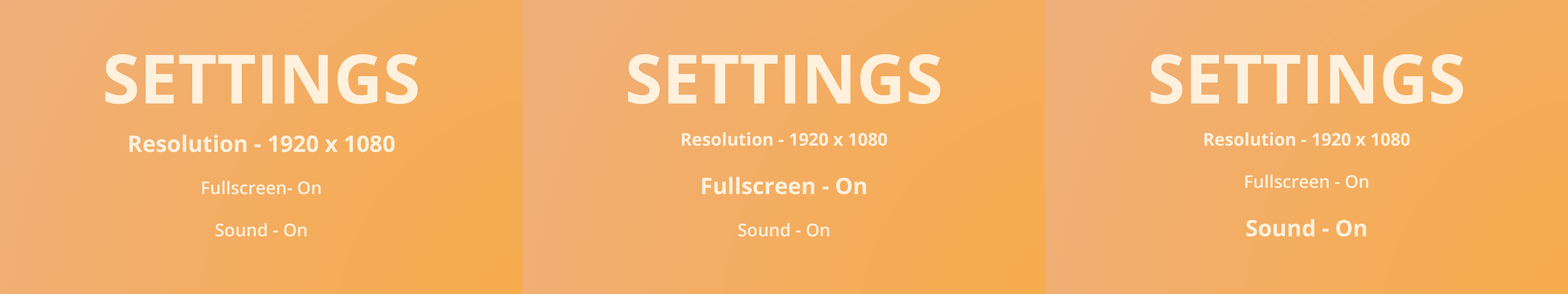
<style>
.page{position:relative;width:1568px;height:294px}
.page>*{position:absolute;margin:0}
.t1{font:17.6px "OpenSans-Semibold";color:#fff1dd}
.t2{font:17.6px "OpenSans-Bold";color:#8f8b8b}
.t3{font:68.1px "OpenSans-Bold";color:#fff1dd}
.t4{font:22.7px "OpenSans-Bold";color:#fff1dd}
.t5{font:17.6px "OpenSans-Bold";color:#fff1dd}
</style>
<div class="page">
<p class="t1" style="left:105px;top:54px;width:313px;height:183px;text-align:center"><span class="t2"><br><br><br></span><span class="t3">SETTINGS<br><br></span><span class="t4">Resolution - 1920 x 1080<br></span><br>Fullscreen- On<br><br>Sound - On</p>
<p class="t5" style="left:628px;top:54px;width:313px;height:183px;text-align:center"><span class="t2"><br><br><br></span><span class="t3">SETTINGS<br></span><br>Resolution - 1920 x 1080<br><br><span class="t4">Fullscreen - On<br></span><span class="t1"><br>Sound - On</span></p>
<p class="t5" style="left:1151px;top:54px;width:312px;height:183px;text-align:center"><span class="t2"><br><br><br></span><span class="t3">SETTINGS<br></span><br>Resolution - 1920 x 1080<br><span class="t1"><br>Fullscreen - On<br><br></span><span class="t4">Sound - On</span></p>
</div>
